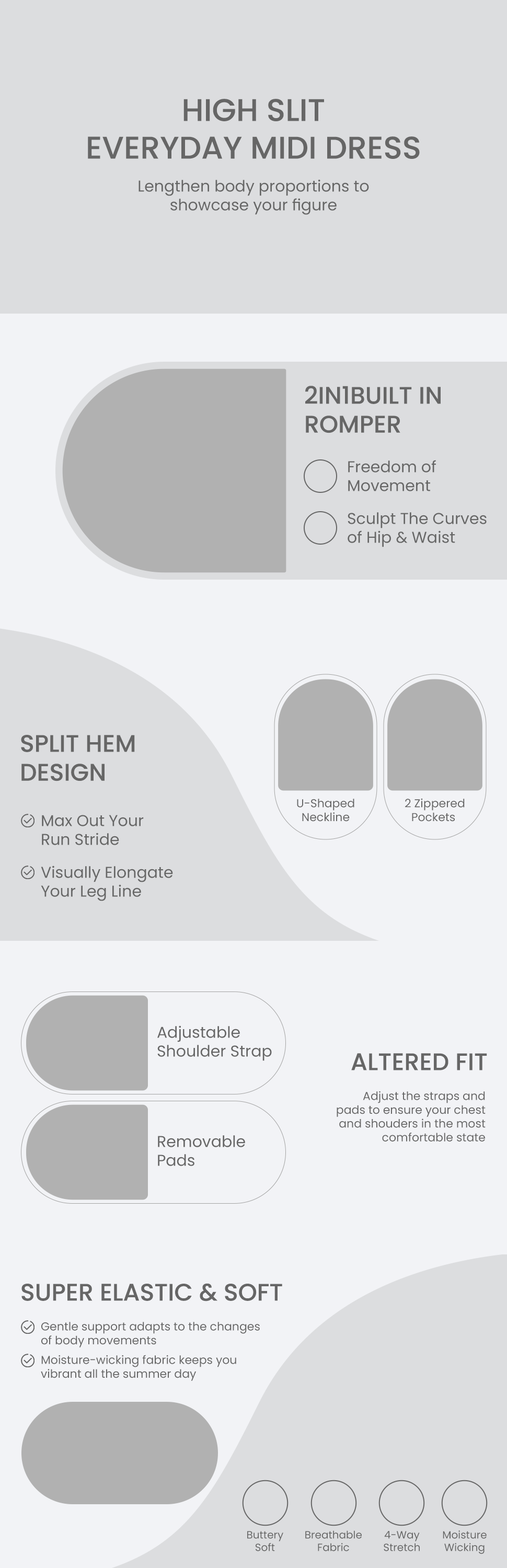
<style>
.page{position:relative;width:507px;height:1568px;background:#dcdddf}
.page>*{position:absolute;margin:0}
.t1{font:31.4px "Poppins-Medium";color:#666666}
.t2{font:15.7px "Poppins-Regular";color:#666666}
.t3{font:24px "Poppins-Medium";color:#666666}
.t4{font:11.5px "Poppins-Regular";color:#666666}
.t5{font:10.5px "Poppins-Regular";color:#666666}
</style>
<div class="page">
<p class="t1" style="left:88px;top:99px;width:332px;height:60px;text-align:center">HIGH SLIT<br>EVERYDAY MIDI DRESS</p>
<p class="t2" style="left:139px;top:179px;width:230px;height:36px;text-align:center">Lengthen body proportions to<br>showcase your figure</p>
<p class="t3" style="left:305px;top:386px;width:136px;height:47px">2IN1BUILT IN<br>ROMPER</p>
<p class="t2" style="left:348px;top:460px;width:88px;height:31px">Freedom of <br>Movement</p>
<p class="t2" style="left:348px;top:512px;width:139px;height:35px">Sculpt The Curves<br>of Hip &amp; Waist</p>
<p class="t3" style="left:21px;top:735px;width:114px;height:46px">SPLIT HEM<br>DESIGN</p>
<p class="t4" style="left:297px;top:799px;width:57px;height:23px;text-align:center">U-Shaped<br>Neckline</p>
<p class="t4" style="left:405px;top:798px;width:60px;height:24px;text-align:center">2 Zippered<br>Pockets</p>
<p class="t2" style="left:42px;top:815px;width:102px;height:30px">Max Out Your<br>Run Stride</p>
<p class="t2" style="left:41px;top:866px;width:132px;height:35px">Visually Elongate<br>Your Leg Line</p>
<p class="t2" style="left:157px;top:1025px;width:115px;height:36px">Adjustable<br>Shoulder Strap</p>
<p class="t3" style="left:351px;top:1053px;width:136px;height:17px">ALTERED FIT</p>
<p class="t4" style="left:337px;top:1091px;width:149px;height:51px;text-align:right">Adjust the straps and<br>pads to ensure your chest<br>and shouders in the most<br>comfortable state</p>
<p class="t2" style="left:158px;top:1135px;width:87px;height:31px">Removable<br>Pads</p>
<p class="t3" style="left:21px;top:1283px;width:261px;height:18px">SUPER ELASTIC &amp; SOFT</p>
<p class="t4" style="left:41px;top:1322px;width:219px;height:25px">Gentle support adapts to the changes<br>of body movements</p>
<p class="t4" style="left:41px;top:1355px;width:195px;height:26px">Moisture-wicking fabric keeps you<br>vibrant all the summer day</p>
<p class="t5" style="left:247px;top:1531px;width:36px;height:20px;text-align:center">Buttery<br>Soft</p>
<p class="t5" style="left:305px;top:1530px;width:57px;height:21px;text-align:center">Breathable<br>Fabric</p>
<p class="t5" style="left:384px;top:1531px;width:36px;height:20px;text-align:center">4-Way<br>Stretch</p>
<p class="t5" style="left:443px;top:1530px;width:44px;height:24px;text-align:center">Moisture<br>Wicking</p>
</div>
